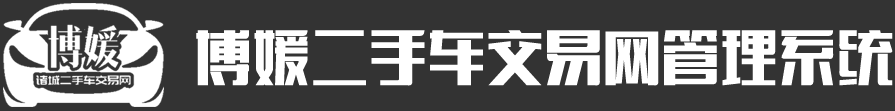
<style>
.page{position:relative;width:895px;height:111px;background:#333333}
.page>*{position:absolute;margin:0}
.t1{font:74px "FZCTHJW--GB1-0";color:#ffffff;scale:0.79 1}
</style>
<div class="page">
<p class="t1" style="left:196px;top:30px;width:697px;height:56px">博媛二手车交易网管理系统</p>
</div>
